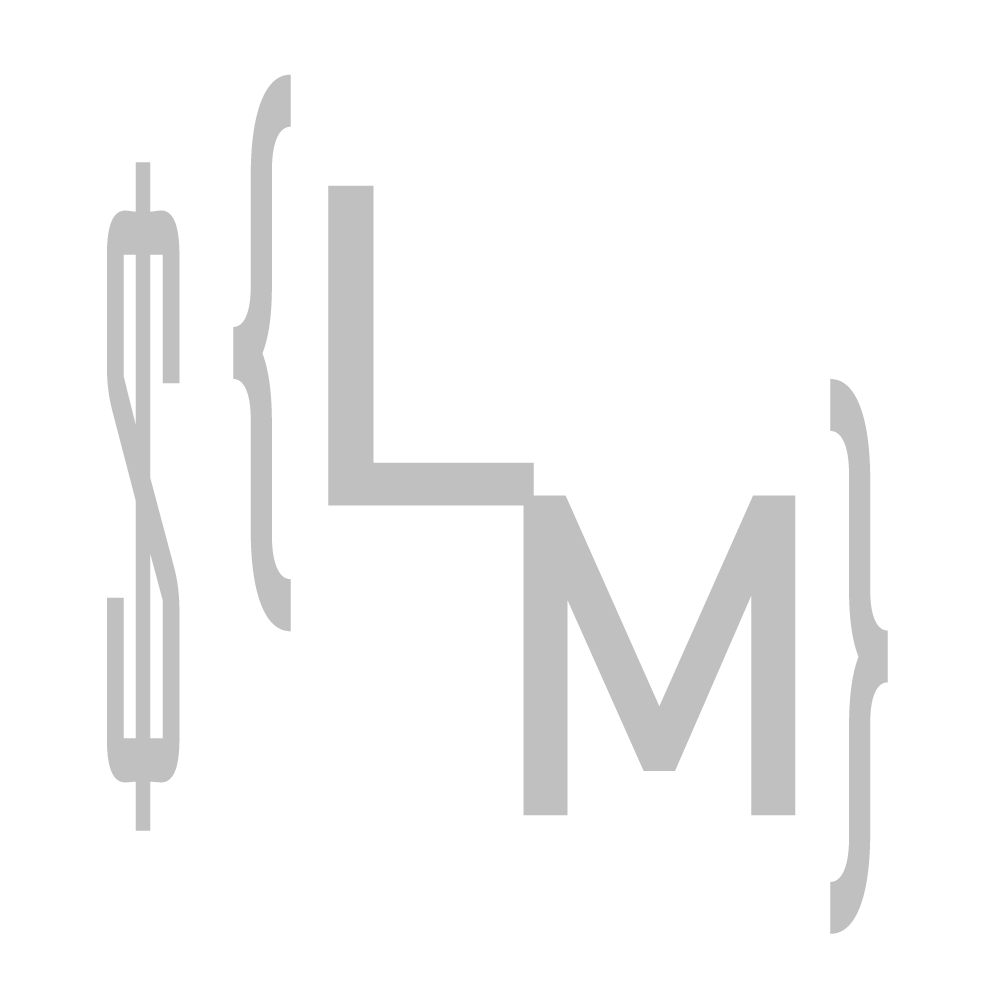
<style>
.page{position:relative;width:1000px;height:1000px;background:#ffffff}
.page>*{position:absolute;margin:0}
.t1{font:547.2px "Bahnschrift";color:#c0c0c0;scale:0.38 1}
.t2{font:755.7px "AgencyFB-Reg";color:#c0c0c0;scale:0.32 1}
.t3{font:450px "Bahnschrift";color:#c0c0c0}
.t4{font:545.5px "Bahnschrift";color:#c0c0c0;scale:0.39 1}
</style>
<div class="page">
<p class="t1" style="left:233px;top:74px;width:58px;height:558px">{</p>
<p class="t2" style="left:107px;top:162px;width:73px;height:669px">$</p>
<p class="t3" style="left:328px;top:185px;width:206px;height:321px">L</p>
<p class="t4" style="left:830px;top:379px;width:58px;height:555px">}</p>
<p class="t3" style="left:523px;top:495px;width:273px;height:321px">M</p>
</div>
